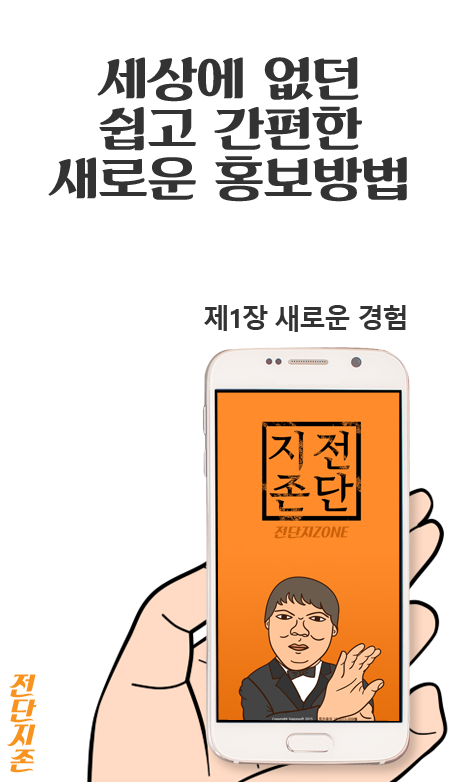
<style>
.page{position:relative;width:456px;height:782px;background:#ffffff}
.page>*{position:absolute;margin:0}
.t1{font:50px/50px "KoreanKRSM-R";letter-spacing:-0.025em;color:#333333}
.t2{font:27.1px "MalgunGothicBold";letter-spacing:-0.075em;color:#333333}
.t3{font:25px/25px "KoreanPDSR-R";letter-spacing:-0.05em;color:#f7931e}
</style>
<div class="page">
<p class="t1" style="left:48px;top:57px;width:359px;height:145px;text-align:center">세상에 없던<br>쉽고 간편한<br>새로운 홍보방법</p>
<p class="t2" style="left:204px;top:305px;width:202px;height:27px">제1장 새로운 경험</p>
<p class="t3" style="left:7px;top:674px;width:30px;height:99px">전<br>단<br>지<br>존</p>
</div>
